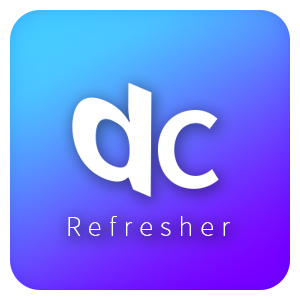
<style>
.page{position:relative;width:300px;height:300px}
.page>*{position:absolute;margin:0}
.t1{font:25px "NotoSansCJKkr-Thin";letter-spacing:0.3em;color:#ffffff}
</style>
<div class="page">
<p class="t1" style="left:68px;top:216px;width:162px;height:20px">Refresher</p>
</div>
